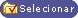
<style>
.page{position:relative;width:78px;height:18px;background:#525297}
.page>*{position:absolute;margin:0}
.t1{font:9px "Verdana";letter-spacing:0.1em;color:#ffffff}
</style>
<div class="page">
<p class="t1" style="left:20px;top:4px;width:54px;height:8px">Selecionar</p>
</div>
